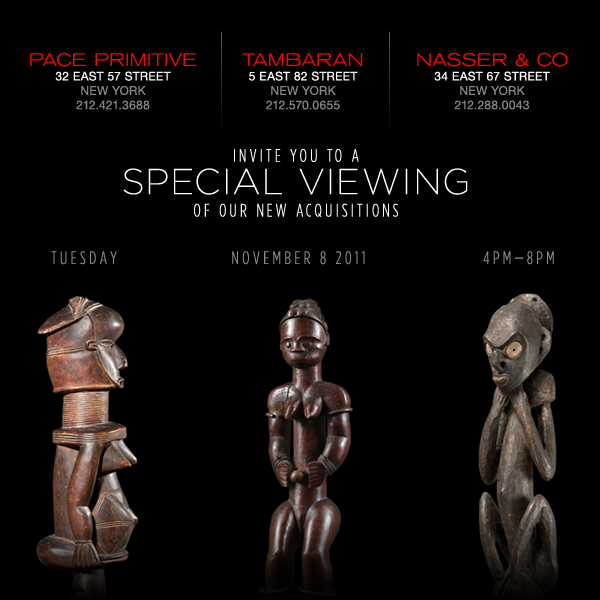
<style>
.page{position:relative;width:600px;height:600px;background:#000000}
.page>*{position:absolute;margin:0}
.t1{font:12px "HelveticaNeue";letter-spacing:0.025em;color:#878787;text-transform:uppercase}
.t2{font:18px "AkzidenzGroteskBE-LightEx";letter-spacing:0.025em;color:#ff0000;text-transform:uppercase}
.t3{font:12px "HelveticaNeue";letter-spacing:0.025em;color:#fefefe;text-transform:uppercase}
.t4{font:18px/22.4px "GothamHTF-LightCondensed";letter-spacing:0.185em;color:#ffffff;text-transform:uppercase}
.t5{font:18px/32.4px "GothamHTF-LightCondensed";letter-spacing:0.185em;color:#ffffff;text-transform:uppercase}
.t6{font:36px/32.4px "GothamHTF-XLight";letter-spacing:0.065em;color:#ffffff}
.t7{font:18px "GothamHTF-LightCondensed";letter-spacing:0.185em;color:#8d8d8d;text-transform:uppercase}
.t8{font:18px "MyriadPro-Regular";letter-spacing:0.185em;color:#8d8d8d;text-transform:uppercase}
</style>
<div class="page">
<p class="t1" style="left:30px;top:52px;width:167px;height:58px;text-align:center"><span class="t2">PACE PRIMITIVE<br></span><span class="t3">32 East 57 Street<br></span>New York<br>212.421.3688</p>
<p class="t1" style="left:242px;top:53px;width:121px;height:57px;text-align:center"><span class="t2">TAMBARAN<br></span><span class="t3">5 East 82 Street<br></span>New York<br>212.570.0655</p>
<p class="t1" style="left:417px;top:52px;width:151px;height:58px;text-align:center"><span class="t2">NASSER &amp; CO<br></span><span class="t3">34 East 67 Street<br></span>New York<br>212.288.0043</p>
<p class="t4" style="left:123px;top:148px;width:345px;height:69px;text-align:center"><span class="t5">Invite you to a<br></span><span class="t6">SPECIAL VIEWING<br></span>OF OUR NEW Acquisitions</p>
<p class="t7" style="left:51px;top:251px;width:503px;height:14px">TUESDAY    NOVEMBER 8 2011    4PM<span class="t8">–</span>8pm</p>
</div>
